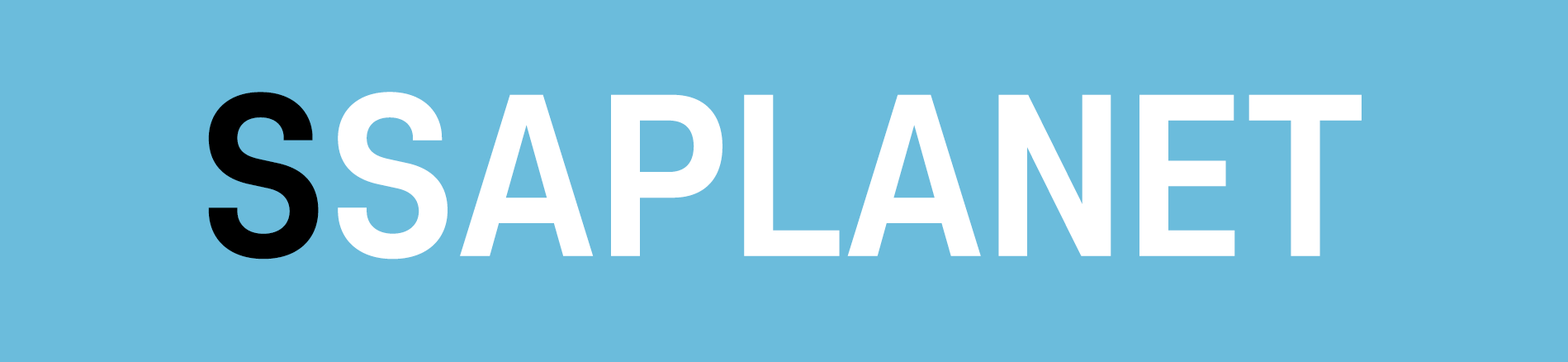
<style>
.page{position:relative;width:1568px;height:362px;background:#6bbcdc}
.page>*{position:absolute;margin:0}
.t1{font:203.4px "S-CoreDream-6Bold";letter-spacing:0.02em;color:#ffffff;scale:0.96 1}
.t2{font:203.4px "S-CoreDream-6Bold";letter-spacing:0.02em;color:#000000;scale:0.96 1}
</style>
<div class="page">
<p class="t1" style="left:208px;top:92px;width:1154px;height:167px"><span class="t2">S</span>SAPLANET</p>
</div>
